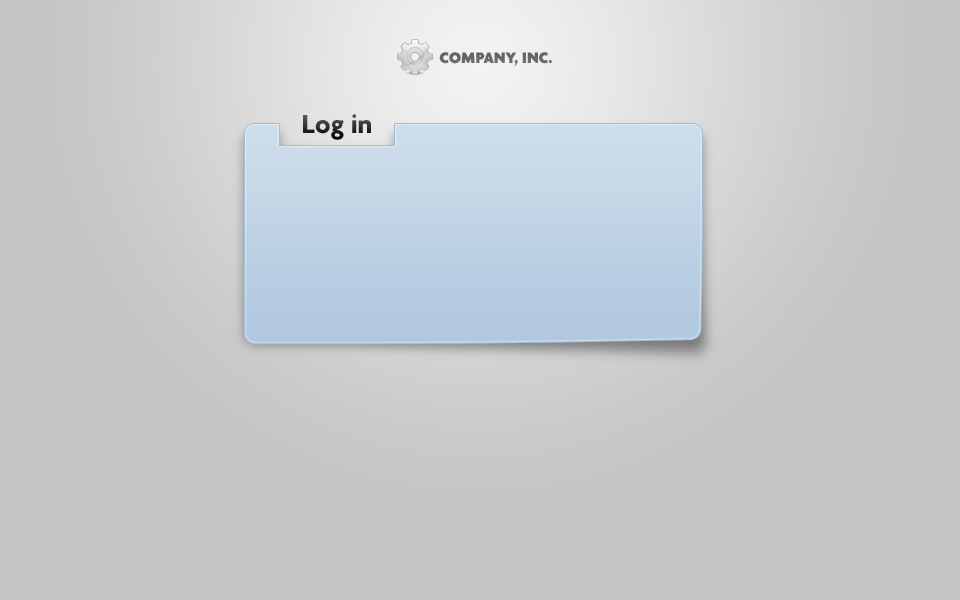
<style>
.page{position:relative;width:960px;height:600px;background:#c4c4c4}
.page>*{position:absolute;margin:0}
.t1{font:16.4px "Agenda-Black";color:#686868;text-transform:uppercase}
.t2{font:28px "Agenda-Bold"}
</style>
<div class="page">
<p class="t1" style="left:439px;top:52px;width:113px;height:14px">company, inc.</p>
<p class="t2" style="left:303px;top:114px;width:68px;height:26px">Log in</p>
</div>
